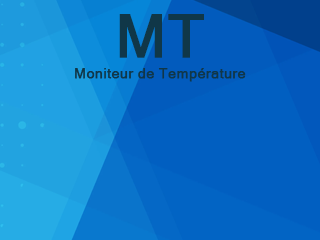
<style>
.page{position:relative;width:320px;height:240px;background:#015fc1}
.page>*{position:absolute;margin:0}
.t1{font:60px "MicrosoftSansSerif";color:#103748;font-weight:bold}
.t2{font:14.5px "MicrosoftSansSerif";color:#103748;font-weight:bold}
</style>
<div class="page">
<p class="t1" style="left:119px;top:14px;width:85px;height:44px">MT</p>
<p class="t2" style="left:75px;top:68px;width:171px;height:14px">Moniteur de Température</p>
</div>
